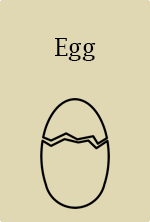
<style>
.page{position:relative;width:150px;height:222px;background:#e0d7b3}
.page>*{position:absolute;margin:0}
.t1{font:24px "LucidaBright";color:#000000}
.t2{font:36px "LucidaBright";color:#000000}
</style>
<div class="page">
<p class="t1" style="left:55px;top:38px;width:41px;height:23px"><span class="t2"><br></span>Egg</p>
</div>
